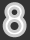
<style>
.page{position:relative;width:30px;height:40px;background:#333333}
.page>*{position:absolute;margin:0}
.t1{font:50px "Bauhaus93";letter-spacing:0.2em;color:#cccccc}
</style>
<div class="page">
<p class="t1" style="left:2px;top:2px;width:25px;height:36px">8</p>
</div>
